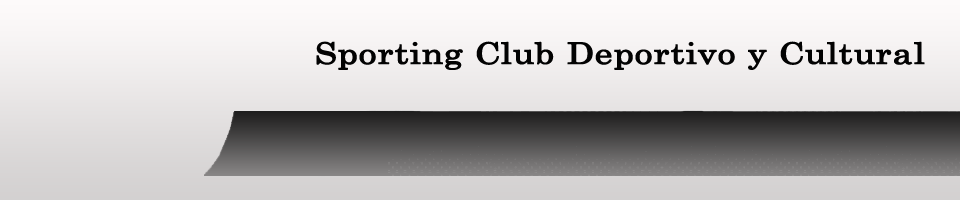
<style>
.page{position:relative;width:960px;height:200px}
.page>*{position:absolute;margin:0}
.t1{font:29.3px "Century";color:#020202;font-weight:bold;scale:1.2 1}
</style>
<div class="page">
<p class="t1" style="left:316px;top:41px;width:609px;height:29px">Sporting Club Deportivo y Cultural</p>
</div>
